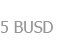
<style>
.page{position:relative;width:57px;height:52px;background:#ffffff}
.page>*{position:absolute;margin:0}
.t1{font:16px "Tahoma";color:#959595}
</style>
<div class="page">
<p class="t1" style="left:0px;top:21px;width:53px;height:12px">5 BUSD</p>
</div>
